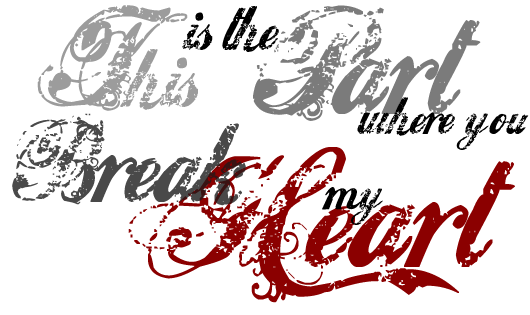
<style>
.page{position:relative;width:530px;height:315px;background:#ffffff}
.page>*{position:absolute;margin:0}
.t1{font:95px "Hawaii-Killer";color:#9c9c9c}
.t2{font:150px "Hawaii-Killer";color:#9c9c9c}
.t3{font:72px "Hawaii-Killer";letter-spacing:0.01em;color:#000000}
.t4{font:160px "Hawaii-Killer";letter-spacing:0.025em;color:#7b7b7b}
.t5{font:160px "Hawaii-Killer";letter-spacing:-0.01em;color:#7b7b7b}
.t6{font:60px "Hawaii-Killer";letter-spacing:0.01em;color:#000000}
.t7{font:130px "Hawaii-Killer";letter-spacing:0.01em;color:#494949}
.t8{font:180px "Hawaii-Killer";letter-spacing:0.025em;color:#8b0000}
</style>
<div class="page">
<p class="t1" style="left:37px;top:5px;width:161px;height:106px"><span class="t2">T</span>his</p>
<p class="t3" style="left:182px;top:6px;width:97px;height:46px">is the</p>
<p class="t4" style="left:253px;top:5px;width:228px;height:116px"><span class="t5"> </span>Part</p>
<p class="t6" style="left:357px;top:97px;width:172px;height:53px">where you</p>
<p class="t7" style="left:12px;top:113px;width:234px;height:93px">Break</p>
<p class="t8" style="left:128px;top:147px;width:387px;height:156px">Heart</p>
<p class="t6" style="left:322px;top:187px;width:61px;height:38px">my</p>
</div>
